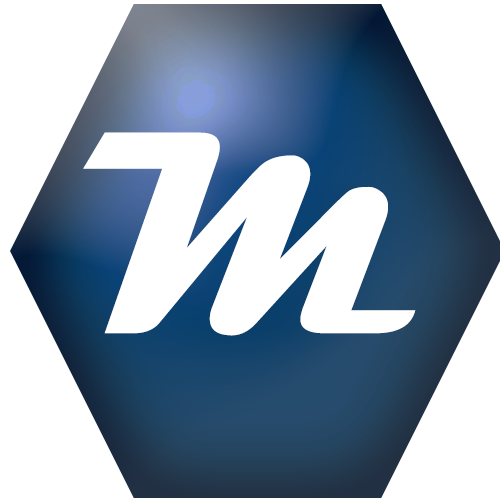
<style>
.page{position:relative;width:500px;height:500px;background:#ffffff}
.page>*{position:absolute;margin:0}
.t1{font:291.7px "Magneto-Bold";color:#ffffff}
</style>
<div class="page">
<p class="t1" style="left:83px;top:132px;width:333px;height:204px">M</p>
</div>
